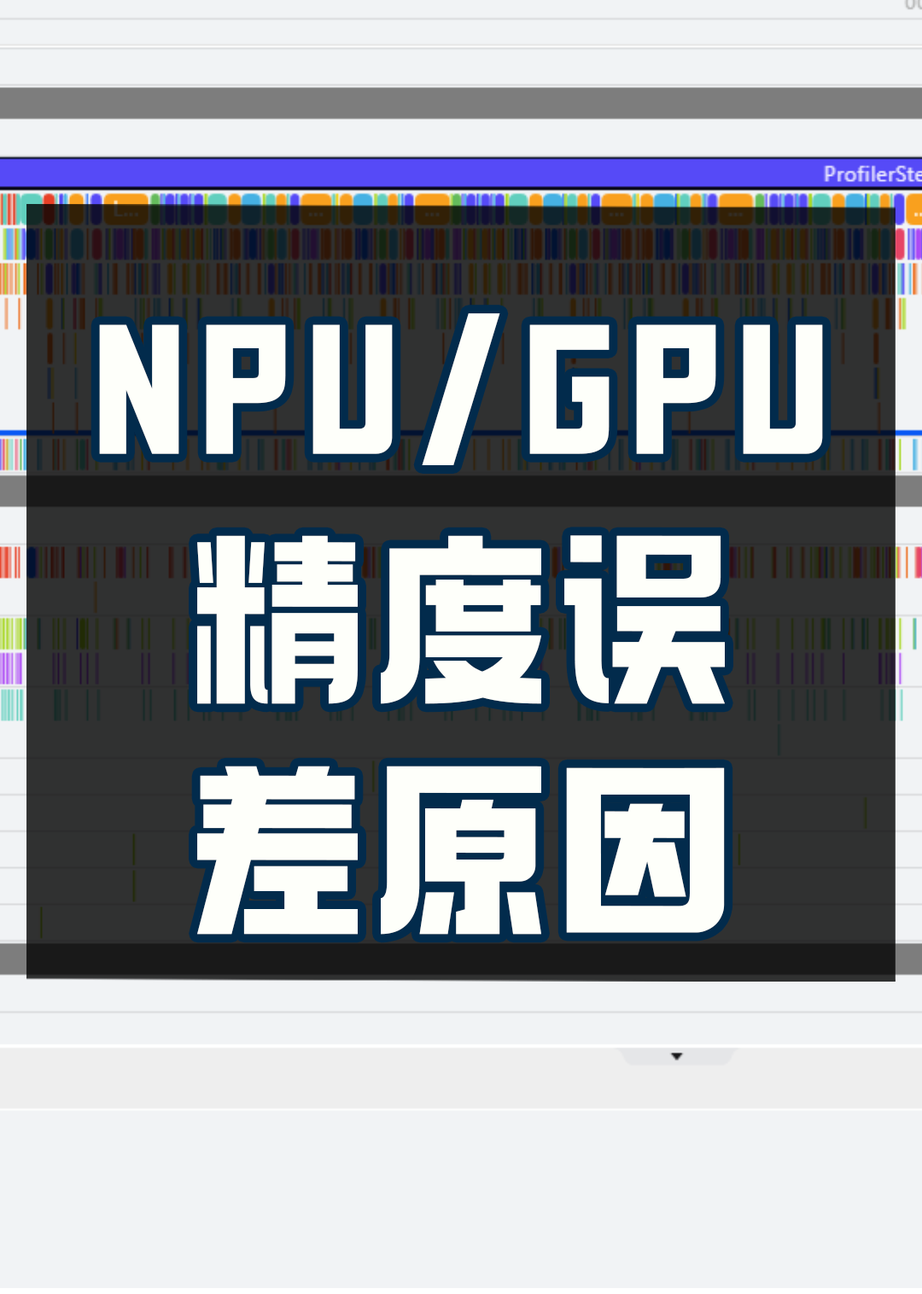
<style>
.page{position:relative;width:922px;height:1294px;background:#f1f3f5}
.page>*{position:absolute;margin:0}
.t1{font:187.7px/230.4px "098-";letter-spacing:0.05em;color:#fefffa}
</style>
<div class="page">
<p class="t1" style="left:99px;top:313px;width:724px;height:621px;text-align:center">NPU/GPU<br>精度误<br>差原因</p>
</div>
